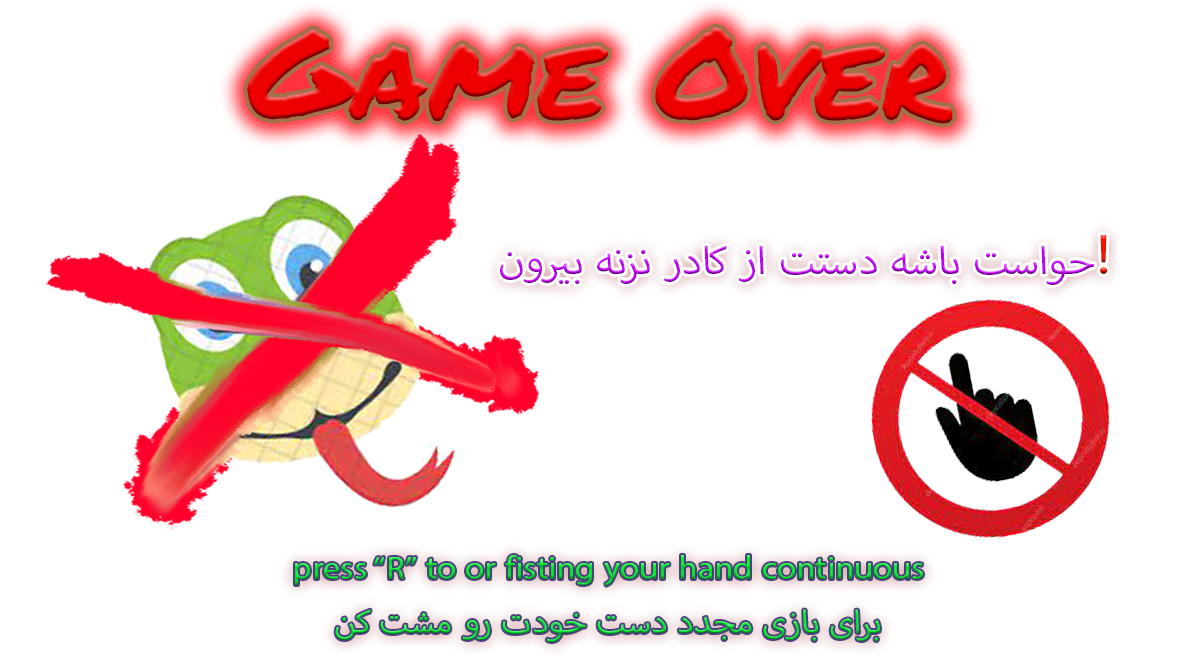
<style>
.page{position:relative;width:1200px;height:660px;background:#ffffff}
.page>*{position:absolute;margin:0}
.t1{font:122.8px "PermanentMarker";color:#ed0000;scale:1.08 1}
.t2{font:54.7px "MyriadArabic-Regular";scale:1.08 1}
.t3{font:79.2px "MyriadArabic-Regular";scale:1.08 1}
.t4{font:45px "MyriadArabic-Regular";scale:1.08 1}
</style>
<div class="page">
<p class="t1" style="left:247px;top:27px;width:707px;height:97px">Game Over</p>
<p class="t2" style="left:500px;top:235px;width:608px;height:50px">حواست باشه دستت از کادر نزنه بیرون<span class="t3">!</span></p>
<p class="t4" style="left:295px;top:555px;width:628px;height:87px;text-align:center">press “R” to or fisting your hand continuous<br>برای بازی مجدد دست خودت رو مشت کن</p>
</div>
